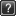
<style>
.page{position:relative;width:16px;height:16px;background:#2c2c2c}
.page>*{position:absolute;margin:0}
.t1{font:12px "Helvetica";color:#e2e2e2}
</style>
<div class="page">
<p class="t1" style="left:5px;top:3px;width:7px;height:10px">?</p>
</div>
